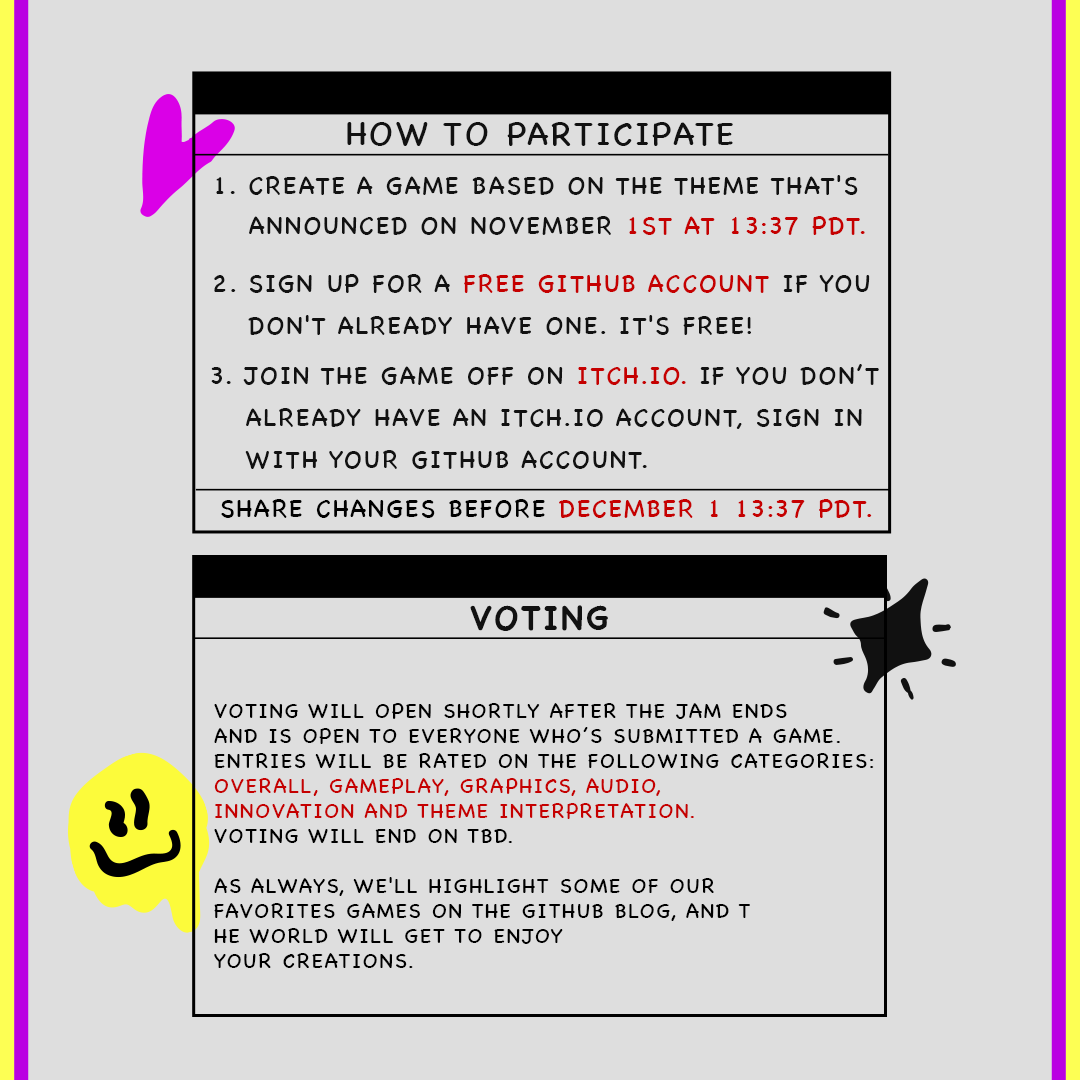
<style>
.page{position:relative;width:1080px;height:1080px;background:#dedede}
.page>*{position:absolute;margin:0}
.t1{font:33.3px "ChalkboardSE-Regular";letter-spacing:0.075em;color:#111111;text-transform:uppercase}
.t2{font:25px/0px "ChalkboardSE-Regular";letter-spacing:0.075em;color:#111111;text-transform:uppercase}
.t3{font:25px/0px "ChalkboardSE-Regular";letter-spacing:0.075em;color:#c50000;text-transform:uppercase}
.t4{font:25px/41.7px "ChalkboardSE-Regular";letter-spacing:0.075em;color:#111111;text-transform:uppercase}
.t5{font:25px/41.7px "ChalkboardSE-Regular";letter-spacing:0.075em;color:#c50000;text-transform:uppercase}
.t6{font:25px "ChalkboardSE-Regular";letter-spacing:0.075em;color:#c50000;text-transform:uppercase}
.t7{font:25px "ChalkboardSE-Regular";letter-spacing:0.075em;color:#000000;text-transform:uppercase}
.t8{font:33.3px "ChalkboardSE-Bold";letter-spacing:0.075em;color:#111111;text-transform:uppercase}
.t9{font:20.8px "ChalkboardSE-Regular";letter-spacing:0.075em;color:#000000;text-transform:uppercase}
.t10{font:20.8px "ChalkboardSE-Regular";letter-spacing:0.075em;color:#c50000;text-transform:uppercase}
</style>
<div class="page">
<p class="t1" style="left:347px;top:122px;width:386px;height:24px">How to participate</p>
<p class="t2" style="left:216px;top:175px;width:649px;height:60px">1. Create a game based on the theme that's <br> announced on November <span class="t3">1st at 13:37 PDT.</span></p>
<p class="t4" style="left:214px;top:274px;width:656px;height:61px">2. Sign up for a <span class="t5">free GitHub account</span> if you <br> don't already have one. It's free!</p>
<p class="t4" style="left:211px;top:364px;width:668px;height:105px">3. Join the Game Off on <span class="t5">itch.io. </span>If you don’t <br> already have an itch.io account, sign in <br> with your GitHub account.</p>
<p class="t6" style="left:221px;top:499px;width:651px;height:19px"><span class="t7">share changes before </span>December 1 13:37 PDT.</p>
<p class="t8" style="left:470px;top:605px;width:138px;height:26px">Voting</p>
<p class="t9" style="left:214px;top:703px;width:660px;height:265px">Voting will open shortly after the jam ends <br>and is open to everyone who’s submitted a game. <br>Entries will be rated on the following categories: <br><span class="t10">Overall, Gameplay, Graphics, Audio, <br>Innovation and Theme Interpretation. <br></span>Voting will end on TBD.<br><br>As always, we'll highlight some of our <br>favorites games on the GitHub Blog, and t<br>he world will get to enjoy <br>your creations.</p>
</div>
